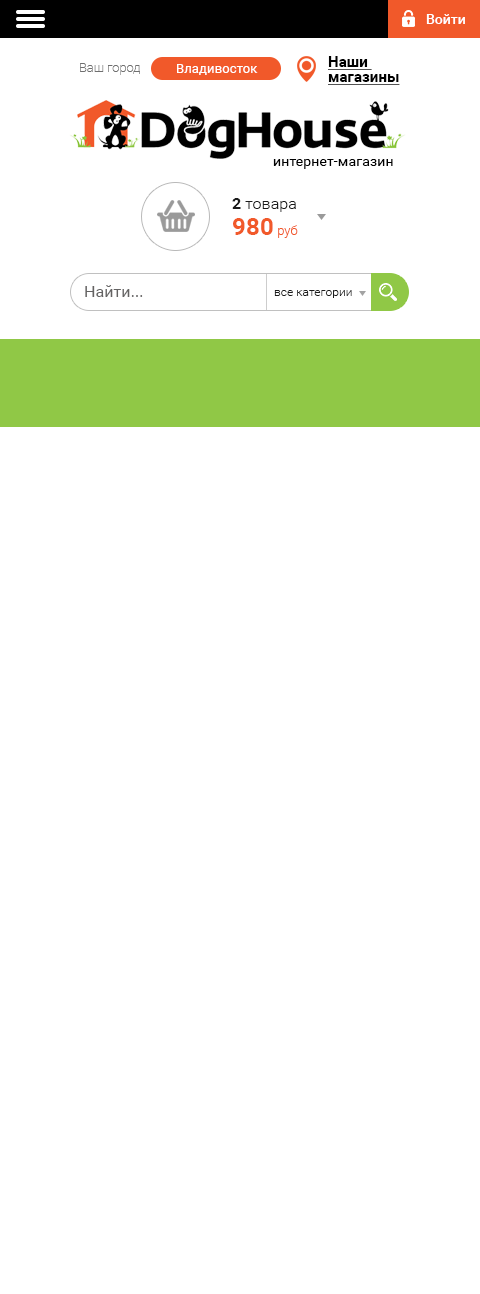
<style>
.page{position:relative;width:480px;height:1294px;background:#ffffff}
.page>*{position:absolute;margin:0}
.t1{font:14px "Roboto-Medium";color:#ffffff}
.t2{font:13px "Roboto-Thin";color:#6f6f6f}
.t3{font:13px "Roboto-Regular";letter-spacing:0.01em;color:#ffffff}
.t4{font:15px/15px "Roboto-Bold";letter-spacing:0.005em;color:#000000;text-decoration:underline}
.t5{font:14px "Roboto-Regular";letter-spacing:0.01em;color:#000000}
.t6{font:16px "Roboto-Light";letter-spacing:0.005em;color:#1b1b1b}
.t7{font:16px "Roboto-Bold";letter-spacing:0.005em;color:#1b1b1b}
.t8{font:24px "Roboto-Bold";letter-spacing:0.005em;color:#f1592a}
.t9{font:13px "Roboto-Light";letter-spacing:0.005em;color:#f1592a}
.t10{font:16px "Roboto-Regular";letter-spacing:0.005em;color:#646363}
.t11{font:12px "Roboto-Light";letter-spacing:0.005em;color:#1b1b1b}
</style>
<div class="page">
<p class="t1" style="left:426px;top:14px;width:39px;height:10px">Войти</p>
<p class="t2" style="left:80px;top:63px;width:60px;height:12px">Ваш город</p>
<p class="t3" style="left:177px;top:64px;width:81px;height:11px">Владивосток</p>
<p class="t4" style="left:328px;top:56px;width:72px;height:29px">Наши <br>магазины</p>
<p class="t5" style="left:273px;top:159px;width:120px;height:10px">интернет-магазин</p>
<p class="t6" style="left:232px;top:198px;width:64px;height:14px"><span class="t7">2</span> товара</p>
<p class="t8" style="left:233px;top:218px;width:65px;height:20px">980 <span class="t9">руб</span></p>
<p class="t10" style="left:85px;top:285px;width:58px;height:12px">Найти...</p>
<p class="t11" style="left:274px;top:290px;width:78px;height:8px">все категории</p>
</div>
